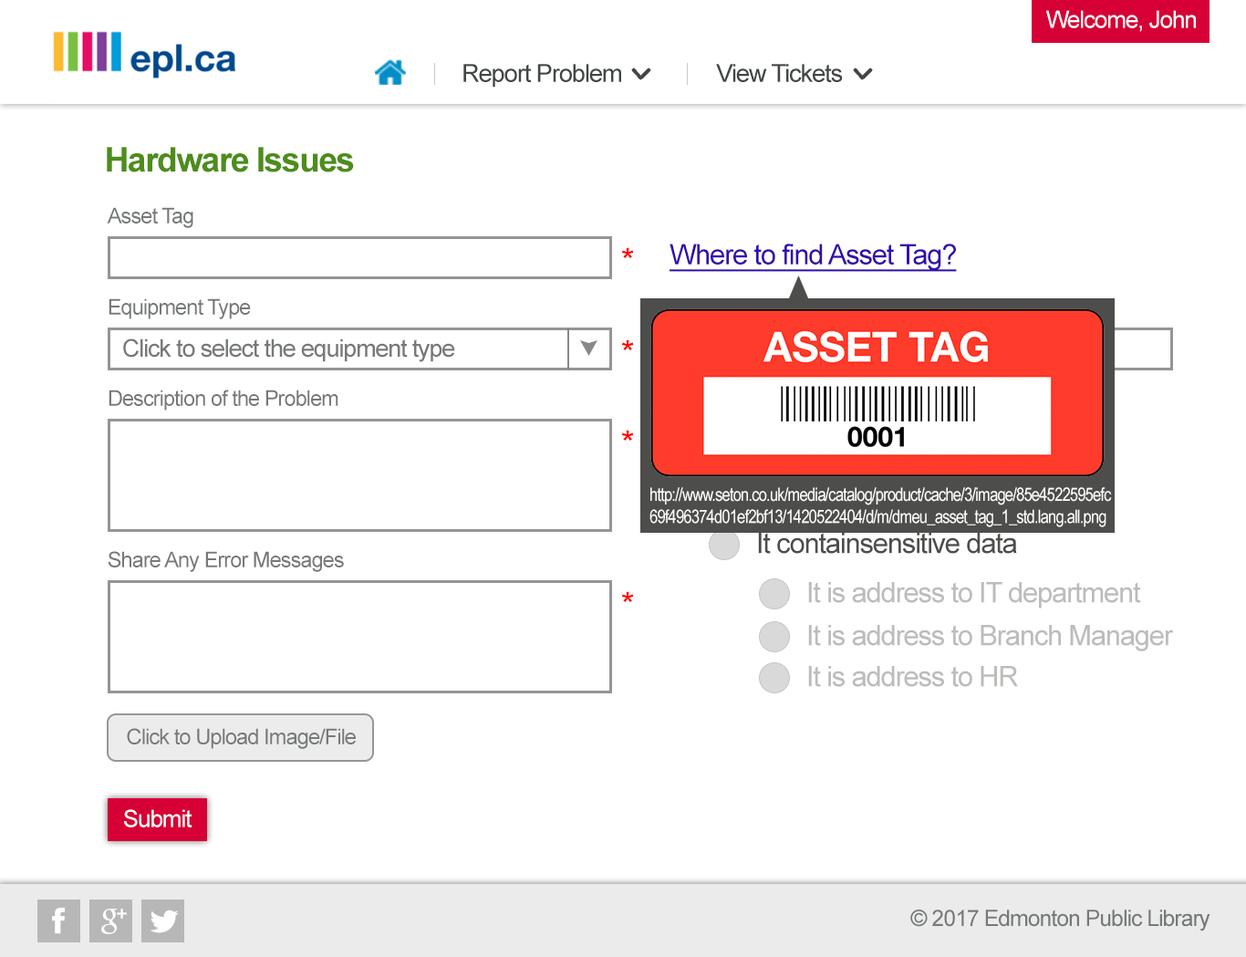
<style>
.page{position:relative;width:1246px;height:957px;background:#ffffff}
.page>*{position:absolute;margin:0}
.t1{font:23.7px "ArialMT";letter-spacing:-0.04em;color:#ffffff}
.t2{font:24.9px "ArialMT";letter-spacing:-0.04em;color:#414546}
.t3{font:33.9px "Arial-BoldMT";letter-spacing:-0.04em;color:#4d8d1a}
.t4{font:21.5px "ArialMT";letter-spacing:-0.04em;color:#767979}
.t5{font:28.3px "ArialMT";letter-spacing:-0.04em;color:#340dab;text-decoration:underline}
.t6{font:33.9px "ArialMT";letter-spacing:-0.04em;color:#ff0000}
.t7{font:24.4px "ArialMT";letter-spacing:-0.04em;color:#767979}
.t8{font:18.4px "ArialNarrow";letter-spacing:-0.04em;color:#ffffff}
.t9{font:28.3px "ArialMT";letter-spacing:-0.04em;color:#4d4d4c}
.t10{font:28.3px "ArialMT";letter-spacing:-0.04em;color:#bcbcba}
.t11{font:21.6px "ArialMT";letter-spacing:-0.04em;color:#767979}
.t12{font:22.6px "ArialMT";letter-spacing:-0.04em;color:#767979}
</style>
<div class="page">
<p class="t1" style="left:1046px;top:10px;width:150px;height:22px">Welcome, John</p>
<p class="t2" style="left:463px;top:64px;width:158px;height:24px">Report Problem</p>
<p class="t2" style="left:716px;top:64px;width:127px;height:18px">View Tickets</p>
<p class="t3" style="left:107px;top:147px;width:247px;height:25px">Hardware Issues</p>
<p class="t4" style="left:107px;top:207px;width:86px;height:21px">Asset Tag</p>
<p class="t5" style="left:670px;top:244px;width:287px;height:28px">Where to find Asset Tag?</p>
<p class="t6" style="left:621px;top:247px;width:13px;height:11px">*</p>
<p class="t4" style="left:109px;top:298px;width:142px;height:21px">Equipment Type</p>
<p class="t7" style="left:123px;top:338px;width:332px;height:24px">Click to select the equipment type</p>
<p class="t6" style="left:621px;top:339px;width:13px;height:11px">*</p>
<p class="t4" style="left:109px;top:390px;width:229px;height:21px">Description of the Problem</p>
<p class="t6" style="left:621px;top:430px;width:13px;height:11px">*</p>
<p class="t8" style="left:650px;top:487px;width:462px;height:40px">http://www.seton.co.uk/media/catalog/product/cache/3/image/85e4522595efc<br>69f496374d01ef2bf13/1420522404/d/m/dmeu_asset_tag_1_std.lang.all.png</p>
<p class="t9" style="left:758px;top:533px;width:259px;height:21px">It containsensitive data</p>
<p class="t4" style="left:108px;top:551px;width:236px;height:21px">Share Any Error Messages</p>
<p class="t6" style="left:621px;top:591px;width:13px;height:11px">*</p>
<p class="t10" style="left:808px;top:582px;width:333px;height:26px">It is address to IT department</p>
<p class="t10" style="left:808px;top:625px;width:366px;height:26px">It is address to Branch Manager</p>
<p class="t10" style="left:808px;top:666px;width:210px;height:21px">It is address to HR</p>
<p class="t11" style="left:127px;top:728px;width:229px;height:21px">Click to Upload Image/File</p>
<p class="t1" style="left:124px;top:809px;width:68px;height:18px">Submit</p>
<p class="t12" style="left:910px;top:909px;width:301px;height:22px">© 2017 Edmonton Public Library</p>
</div>
